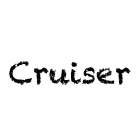
<style>
.page{position:relative;width:140px;height:140px;background:#ffffff}
.page>*{position:absolute;margin:0}
.t1{font:30px "Chalkduster";color:#050505}
</style>
<div class="page">
<p class="t1" style="left:9px;top:61px;width:122px;height:24px">Cruiser</p>
</div>
